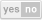
<style>
.page{position:relative;width:42px;height:20px;background:#efefef}
.page>*{position:absolute;margin:0}
.t1{font:10px "ArialMT";color:#a3a3a3;font-weight:bold}
.t2{font:10px "ArialMT";color:#ffffff;font-weight:bold}
</style>
<div class="page">
<p class="t1" style="left:3px;top:7px;width:17px;height:8px">yes</p>
<p class="t2" style="left:25px;top:7px;width:12px;height:6px">no</p>
</div>
